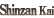
<style>
.page{position:relative;width:54px;height:18px;background:#ffffff}
.page>*{position:absolute;margin:0}
.t1{font:14px "RyuminPro-ExBold";letter-spacing:-0.11em;color:#4a3f32;font-weight:bold;scale:0.8 1}
.t2{font:12px "RyuminPro-ExBold";letter-spacing:-0.11em;color:#4a3f32;font-weight:bold;scale:0.8 1}
</style>
<div class="page">
<p class="t1" style="left:0px;top:4px;width:55px;height:12px">Shinzan <span class="t2">Kai</span></p>
</div>
